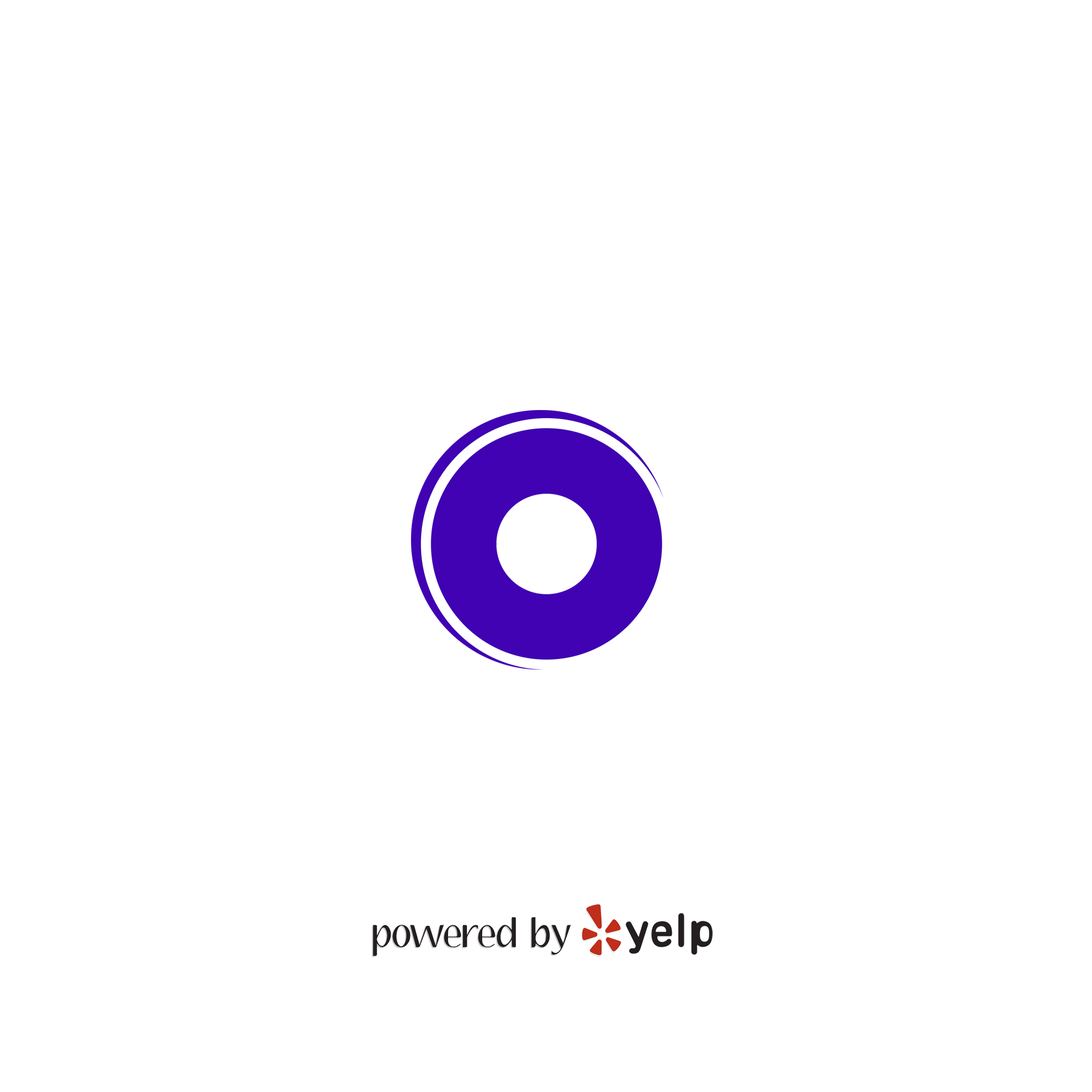
<style>
.page{position:relative;width:1092px;height:1092px;background:#ffffff}
.page>*{position:absolute;margin:0}
.t1{font:34.7px "Aubrey";color:#231f20}
</style>
<div class="page">
<p class="t1" style="left:373px;top:917px;width:198px;height:39px">powered  by</p>
</div>
